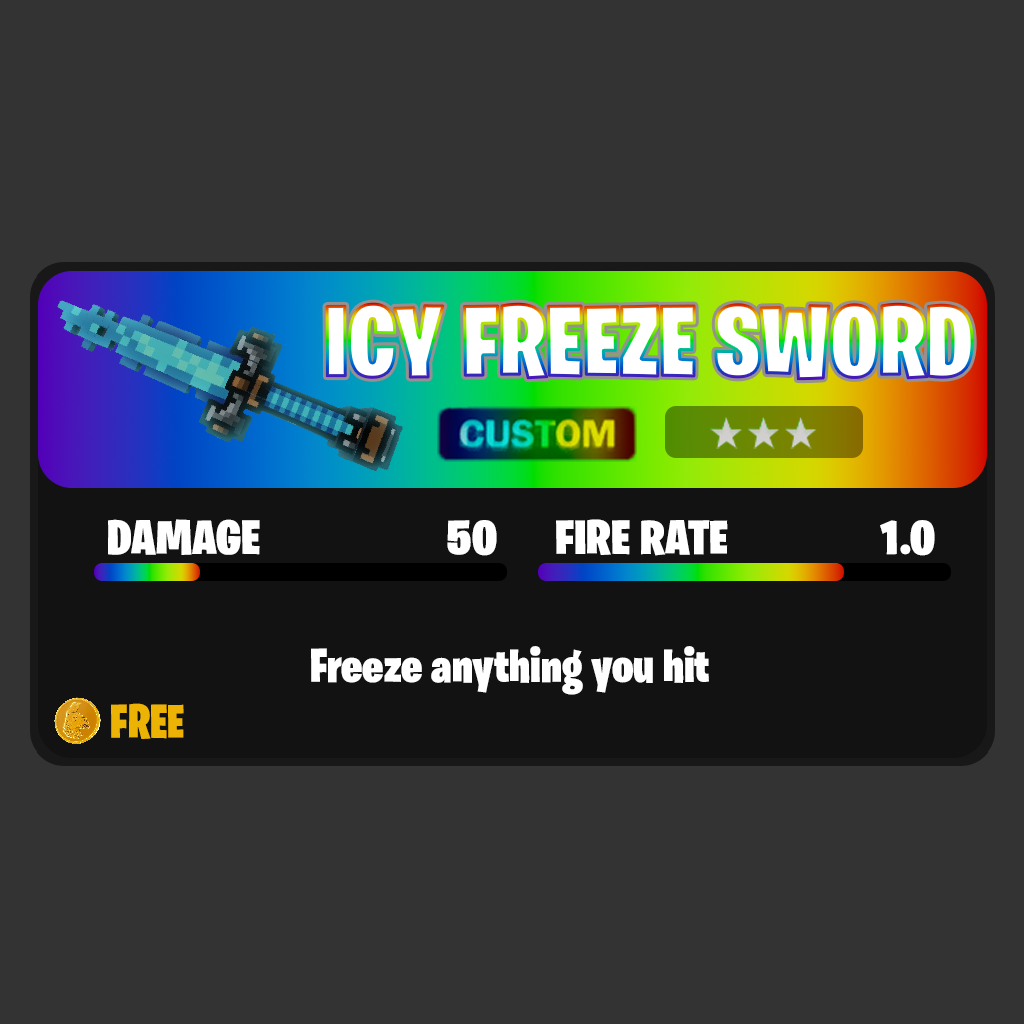
<style>
.page{position:relative;width:1024px;height:1024px;background:#333333}
.page>*{position:absolute;margin:0}
.t1{font:100.8px "BurbankBigCondensed-Black";color:#ffffff}
.t2{font:48.4px "BurbankBigCondensed-Black";color:#ffffff;scale:1.1 1}
.t3{font:48.3px "BurbankBigCondensed-Black";color:#ffffff;scale:1.1 1}
.t4{font:48px "BurbankBigCondensed-Black";color:#ffffff}
.t5{font:48px "BurbankBigCondensed-Black";color:#ecb304}
</style>
<div class="page">
<p class="t1" style="left:326px;top:303px;width:647px;height:77px">ICY FREEZE SWORD</p>
<p class="t2" style="left:108px;top:519px;width:152px;height:36px">DAMAGE</p>
<p class="t2" style="left:447px;top:520px;width:50px;height:36px">50</p>
<p class="t3" style="left:556px;top:519px;width:172px;height:37px">FIRE RATE</p>
<p class="t3" style="left:880px;top:520px;width:55px;height:36px">1.0</p>
<p class="t4" style="left:311px;top:646px;width:398px;height:49px">Freeze anything you hit</p>
<p class="t5" style="left:111px;top:703px;width:73px;height:36px">FREE</p>
</div>
